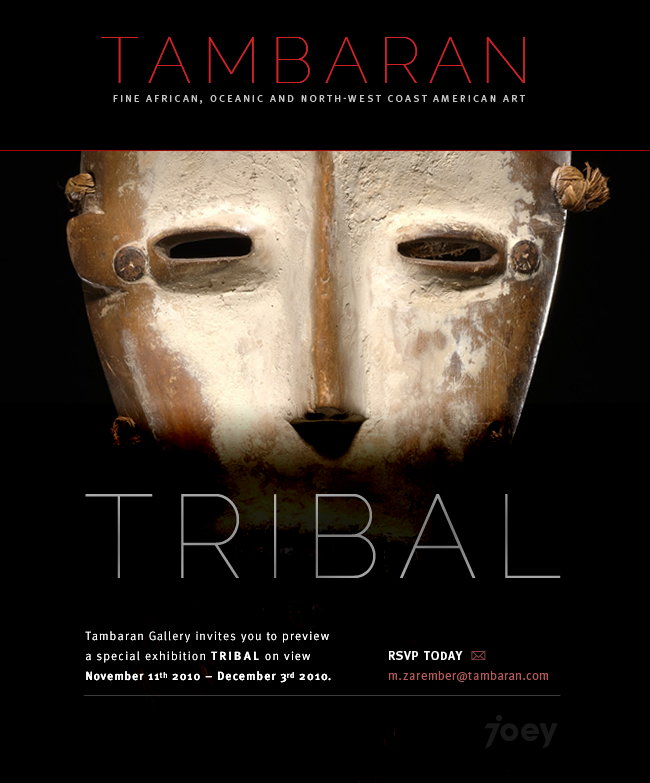
<style>
.page{position:relative;width:650px;height:783px;background:#000000}
.page>*{position:absolute;margin:0}
.t1{font:64.8px "Raleway-Thin";letter-spacing:0.23em;color:#cf2127}
.t2{font:10.2px "MetaPro-Book";letter-spacing:0.23em;color:#c4c4c4;text-transform:uppercase}
.t3{font:118.1px "Raleway-Thin";letter-spacing:0.19em;color:#959595}
.t4{font:12px/20px "MetaPro-Normal";letter-spacing:0.09em;color:#fefefe}
.t5{font:12px/20px "MetaPro-Bold";letter-spacing:0.19em;color:#fefefe}
.t6{font:12px/20px "MetaPro-Bold";letter-spacing:0.09em;color:#fefefe}
.t7{font:8px/20px "MetaPro-Bold";letter-spacing:0.09em;color:#fefefe}
.t8{font:12px/20px "MetaPro-Normal";letter-spacing:0.09em;color:#b55858}
</style>
<div class="page">
<p class="t1" style="left:101px;top:37px;width:424px;height:46px">TAMBARAN</p>
<p class="t1" style="left:101px;top:37px;width:424px;height:46px">TAMBARAN</p>
<p class="t2" style="left:113px;top:95px;width:412px;height:9px">Fine African, Oceanic and North-West Coast American Art</p>
<p class="t3" style="left:85px;top:494px;width:476px;height:84px">TRIBAL</p>
<p class="t4" style="left:85px;top:631px;width:246px;height:52px">Tambaran Gallery invites you to preview a special exhibition <span class="t5">TRIBAL</span> on view <span class="t6">November 11</span><span class="t7">th</span><span class="t6"> 2010 – December 3</span><span class="t7">rd</span><span class="t6"> 2010.</span></p>
<p class="t4" style="left:85px;top:631px;width:246px;height:52px">Tambaran Gallery invites you to preview a special exhibition <span class="t5">TRIBAL</span> on view <span class="t6">November 11</span><span class="t7">th</span><span class="t6"> 2010 – December 3</span><span class="t7">rd</span><span class="t6"> 2010.</span></p>
<p class="t8" style="left:388px;top:651px;width:160px;height:31px"><span class="t6">RSVP TODAY <br></span>m.zarember@tambaran.com</p>
</div>
